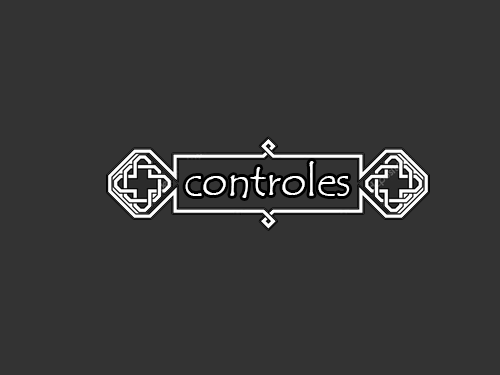
<style>
.page{position:relative;width:500px;height:375px;background:#333333}
.page>*{position:absolute;margin:0}
.t1{font:41.4px "TempusSansITC";color:#ffffff;scale:1.03 1}
</style>
<div class="page">
<p class="t1" style="left:185px;top:161px;width:165px;height:37px">controles</p>
</div>
